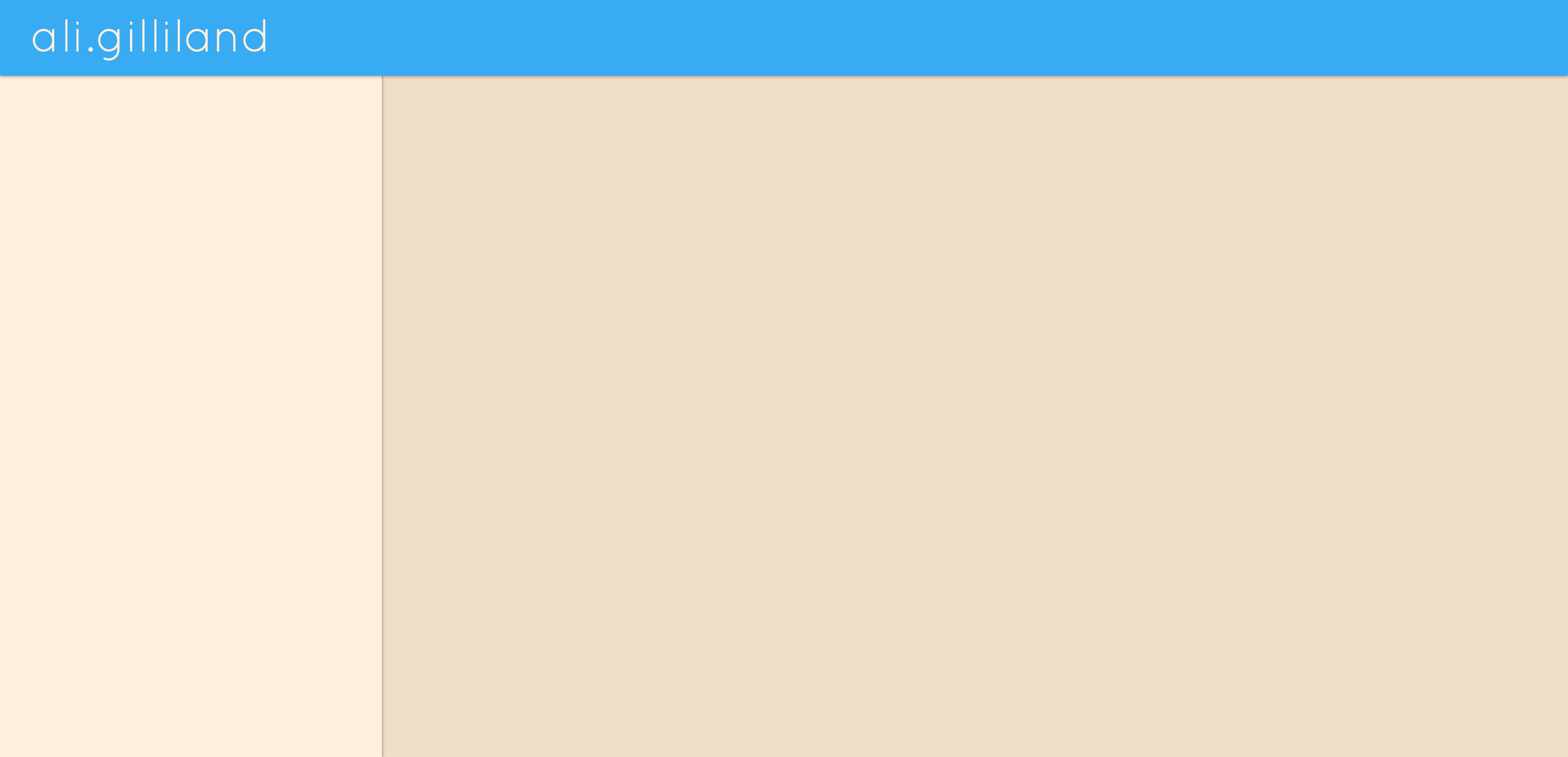
<style>
.page{position:relative;width:1568px;height:757px;background:#eedec8}
.page>*{position:absolute;margin:0}
.t1{font:46.7px "QuicksandBook-Regular";color:#fff0dc}
</style>
<div class="page">
<p class="t1" style="left:33px;top:19px;width:233px;height:42px">ali.gilliland</p>
</div>
